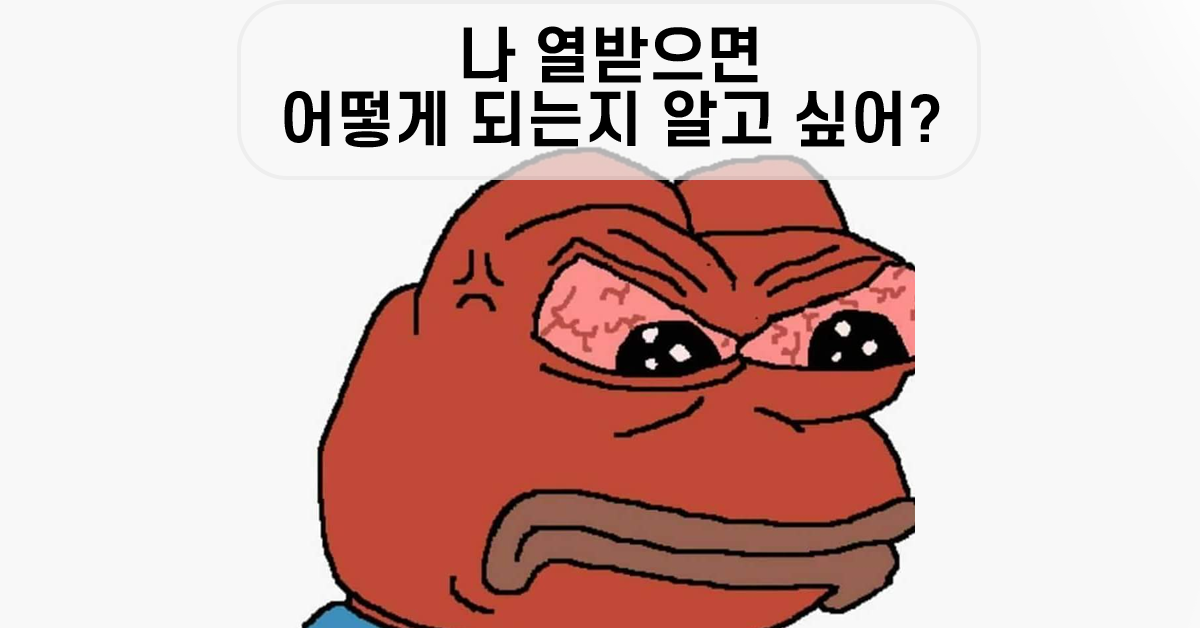
<style>
.page{position:relative;width:1200px;height:628px;background:#f8f8f8}
.page>*{position:absolute;margin:0}
.t1{font:60px/64px "S-CoreDream-6Bold";color:#000000}
</style>
<div class="page">
<p class="t1" style="left:284px;top:26px;width:656px;height:122px;text-align:center">나 열받으면<br>어떻게 되는지 알고 싶어?</p>
</div>
